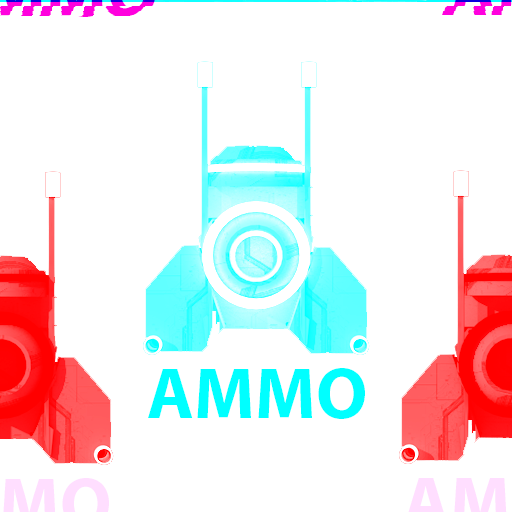
<style>
.page{position:relative;width:512px;height:512px;background:#ffffff}
.page>*{position:absolute;margin:0}
.t1{font:72px "MyriadPro-Bold";color:#00ffff}
</style>
<div class="page">
<p class="t1" style="left:148px;top:366px;width:217px;height:51px">AMMO</p>
</div>
